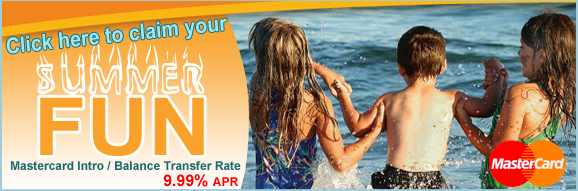
<style>
.page{position:relative;width:578px;height:191px}
.page>*{position:absolute;margin:0}
.t1{font:22px "Arial-BoldMT";color:#98e9fb;scale:0.9 1}
.t2{font:60px "BaileysCar";color:#ffffff}
.t3{font:80px "Arial-BoldMT";color:#f8a22b;scale:1.07 1}
.t4{font:12px "Arial-BoldMT";color:#196970}
.t5{font:16px "Arial-BoldMT";color:#ff0000}
.t6{font:12px "Arial-BoldMT";color:#ff0000}
</style>
<div class="page">
<p class="t1" style="left:6px;top:18px;width:221px;height:36px;rotate:-6deg">Click here to claim your</p>
<p class="t2" style="left:36px;top:42px;width:169px;height:54px">SUMMER</p>
<p class="t3" style="left:40px;top:97px;width:164px;height:59px">FUN</p>
<p class="t4" style="left:11px;top:161px;width:230px;height:9px">Mastercard Intro / Balance Transfer Rate</p>
<p class="t5" style="left:163px;top:174px;width:76px;height:13px">9.99% <span class="t6">APR</span></p>
</div>
